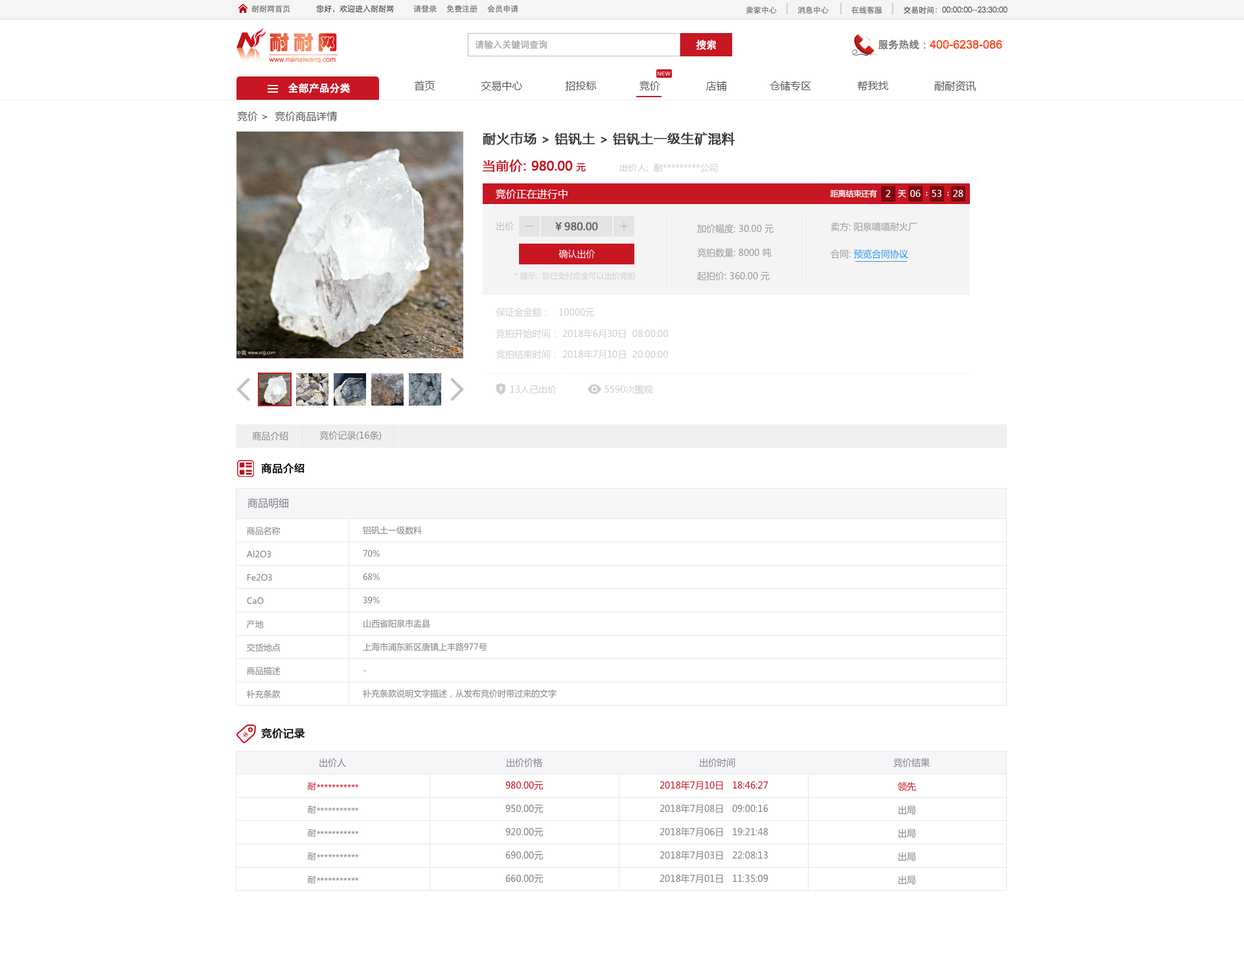
<style>
.page{position:relative;width:1244px;height:959px;background:#ffffff}
.page>*{position:absolute;margin:0}
.t1{font:10.4px "MicrosoftYaHei";color:#535353}
.t2{font:13px "MicrosoftYaHei";color:#333333;font-weight:bold}
.t3{font:11.7px "MicrosoftYaHei";color:#333333;font-weight:bold}
.t4{font:13px "MicrosoftYaHei";letter-spacing:-0.05em;color:#c81623;font-weight:bold}
.t5{font:13px "MicrosoftYaHei";color:#c81623;font-weight:bold}
.t6{font:9.1px "MicrosoftYaHei";color:#c81623;font-weight:bold}
.t7{font:9.1px "MicrosoftYaHei";color:#cccccc}
.t8{font:10.4px "MicrosoftYaHei";color:#ffffff}
.t9{font:7.8px "MicrosoftYaHei";color:#ffffff}
.t10{font:9.1px "MicrosoftYaHei";color:#ffffff}
.t11{font:9.1px "MicrosoftYaHei";color:#bbbbbb}
.t12{font:10.4px "MicrosoftYaHei";letter-spacing:-0.05em;color:#666666;font-weight:bold}
.t13{font:10.4px "MicrosoftYaHei";color:#666666;font-weight:bold}
.t14{font:9.1px "MicrosoftYaHei";color:#999999}
.t15{font:9.1px "MicrosoftYaHei";color:#2c94ed}
.t16{font:7.8px "MicrosoftYaHei";color:#cccccc}
.t17{font:9.1px "MicrosoftYaHei";color:#898989}
.t18{font:10.4px "MicrosoftYaHei";color:#000000;font-weight:bold}
.t19{font:10.4px "MicrosoftYaHei";color:#808087}
.t20{font:8.4px "MicrosoftYaHei";color:#808087}
.t21{font:8.4px "MicrosoftYaHei"}
.t22{font:9.1px "MicrosoftYaHei";color:#808087}
.t23{font:8.4px "MicrosoftYaHei";color:#c81623}
.t24{font:9.1px "MicrosoftYaHei";color:#c81623}
</style>
<div class="page">
<p class="t1" style="left:414px;top:80px;width:562px;height:11px">首页               交易中心              招投标              竞价               店铺              仓储专区               帮我找               耐耐资讯</p>
<p class="t1" style="left:237px;top:111px;width:100px;height:11px">竞价 &gt;  竞价商品详情</p>
<p class="t2" style="left:483px;top:132px;width:252px;height:14px">耐火市场<span class="t3"> &gt; </span>铝钒土<span class="t3"> &gt; </span>铝钒土一级生矿混料</p>
<p class="t4" style="left:483px;top:159px;width:103px;height:13px"><span class="t5">当前价: </span>980.00 <span class="t6">元</span></p>
<p class="t7" style="left:619px;top:164px;width:99px;height:8px">出价人:  耐*********公司</p>
<p class="t8" style="left:496px;top:189px;width:71px;height:10px">竞价正在进行中</p>
<p class="t9" style="left:830px;top:189px;width:47px;height:9px">距离结束还有</p>
<p class="t10" style="left:886px;top:190px;width:4px;height:7px">2</p>
<p class="t9" style="left:898px;top:190px;width:8px;height:8px">天</p>
<p class="t10" style="left:910px;top:190px;width:11px;height:7px">06</p>
<p class="t9" style="left:926px;top:192px;width:2px;height:4px">：</p>
<p class="t10" style="left:932px;top:190px;width:9px;height:7px">53</p>
<p class="t9" style="left:947px;top:192px;width:2px;height:4px">：</p>
<p class="t10" style="left:953px;top:190px;width:10px;height:7px">28</p>
<p class="t11" style="left:496px;top:222px;width:18px;height:9px">出价</p>
<p class="t12" style="left:555px;top:222px;width:43px;height:9px"><span class="t13">￥</span>980.00</p>
<p class="t14" style="left:697px;top:224px;width:76px;height:9px">加价幅度: 30.00 元</p>
<p class="t14" style="left:830px;top:222px;width:87px;height:9px">卖方: 阳泉嘻嘻耐火厂</p>
<p class="t10" style="left:558px;top:249px;width:37px;height:9px">确认出价</p>
<p class="t14" style="left:697px;top:248px;width:75px;height:9px">竞拍数量: 8000 吨</p>
<p class="t15" style="left:830px;top:249px;width:78px;height:9px"><span class="t14">合同: </span>预览合同协议</p>
<p class="t16" style="left:514px;top:272px;width:121px;height:8px">* 提示:  您已支付定金可以出价竞拍</p>
<p class="t14" style="left:697px;top:271px;width:73px;height:9px">起拍价: 360.00 元</p>
<p class="t7" style="left:496px;top:308px;width:98px;height:9px">保证金金额：   10000元</p>
<p class="t7" style="left:496px;top:329px;width:172px;height:9px">竞拍开始时间： 2018年6月30日  08:00:00</p>
<p class="t7" style="left:496px;top:350px;width:172px;height:9px">竞拍结束时间： 2018年7月10日  20:00:00</p>
<p class="t7" style="left:510px;top:385px;width:46px;height:8px">13人已出价</p>
<p class="t7" style="left:604px;top:385px;width:49px;height:10px">5590次围观</p>
<p class="t17" style="left:252px;top:431px;width:36px;height:9px">商品介绍</p>
<p class="t17" style="left:319px;top:431px;width:63px;height:9px">竞价记录(16条)</p>
<p class="t18" style="left:261px;top:463px;width:43px;height:11px">商品介绍</p>
<p class="t19" style="left:247px;top:498px;width:41px;height:11px">商品明细</p>
<p class="t20" style="left:247px;top:527px;width:33px;height:8px">商品名称</p>
<p class="t20" style="left:363px;top:526px;width:59px;height:8px">铝矾土一级数料</p>
<p class="t20" style="left:246px;top:550px;width:25px;height:8px">Al2O3</p>
<p class="t20" style="left:363px;top:549px;width:17px;height:8px">70%</p>
<p class="t20" style="left:247px;top:573px;width:25px;height:8px">Fe2O3</p>
<p class="t20" style="left:363px;top:573px;width:17px;height:7px">68%</p>
<p class="t20" style="left:247px;top:597px;width:17px;height:7px">CaO</p>
<p class="t20" style="left:363px;top:596px;width:17px;height:8px">39%</p>
<p class="t20" style="left:246px;top:620px;width:18px;height:8px">产地</p>
<p class="t20" style="left:363px;top:619px;width:67px;height:9px">山西省阳泉市盂县</p>
<p class="t20" style="left:247px;top:643px;width:33px;height:9px">交货地点</p>
<p class="t20" style="left:363px;top:643px;width:124px;height:8px">上海市浦东新区唐镇上丰路977号</p>
<p class="t20" style="left:247px;top:667px;width:33px;height:8px">商品描述</p>
<p class="t21" style="left:363px;top:670px;width:3px;height:1px">-</p>
<p class="t20" style="left:246px;top:690px;width:34px;height:8px">补充条款</p>
<p class="t20" style="left:363px;top:689px;width:193px;height:9px">补充条款说明文字描述，从发布竞价时带过来的文字</p>
<p class="t18" style="left:261px;top:727px;width:44px;height:11px">竞价记录</p>
<p class="t22" style="left:319px;top:758px;width:27px;height:9px">出价人</p>
<p class="t22" style="left:507px;top:758px;width:35px;height:9px">出价价格</p>
<p class="t22" style="left:700px;top:758px;width:35px;height:9px">出价时间</p>
<p class="t22" style="left:893px;top:758px;width:37px;height:9px">竞价结果</p>
<p class="t23" style="left:308px;top:782px;width:8px;height:8px">耐</p>
<p class="t21" style="left:317px;top:784px;width:41px;height:3px">***********</p>
<p class="t24" style="left:505px;top:781px;width:38px;height:9px">980.00元</p>
<p class="t24" style="left:659px;top:781px;width:109px;height:9px">2018年7月10日   18:46:27</p>
<p class="t24" style="left:897px;top:782px;width:19px;height:9px">领先</p>
<p class="t20" style="left:308px;top:805px;width:8px;height:9px">耐</p>
<p class="t20" style="left:317px;top:807px;width:41px;height:3px">***********</p>
<p class="t22" style="left:505px;top:804px;width:38px;height:9px">950.00元</p>
<p class="t22" style="left:659px;top:804px;width:109px;height:9px">2018年7月08日   09:00:16</p>
<p class="t22" style="left:898px;top:805px;width:17px;height:9px">出局</p>
<p class="t20" style="left:308px;top:829px;width:8px;height:8px">耐</p>
<p class="t20" style="left:317px;top:830px;width:41px;height:4px">***********</p>
<p class="t22" style="left:505px;top:827px;width:38px;height:9px">920.00元</p>
<p class="t22" style="left:659px;top:827px;width:109px;height:9px">2018年7月06日   19:21:48</p>
<p class="t22" style="left:898px;top:829px;width:17px;height:9px">出局</p>
<p class="t20" style="left:308px;top:852px;width:8px;height:8px">耐</p>
<p class="t20" style="left:317px;top:854px;width:41px;height:3px">***********</p>
<p class="t22" style="left:505px;top:851px;width:38px;height:9px">690.00元</p>
<p class="t22" style="left:659px;top:851px;width:109px;height:9px">2018年7月03日   22:08:13</p>
<p class="t22" style="left:898px;top:852px;width:17px;height:9px">出局</p>
<p class="t20" style="left:308px;top:875px;width:8px;height:9px">耐</p>
<p class="t20" style="left:317px;top:877px;width:41px;height:3px">***********</p>
<p class="t22" style="left:505px;top:874px;width:38px;height:9px">660.00元</p>
<p class="t22" style="left:659px;top:874px;width:109px;height:9px">2018年7月01日   11:35:09</p>
<p class="t22" style="left:898px;top:875px;width:17px;height:9px">出局</p>
</div>
